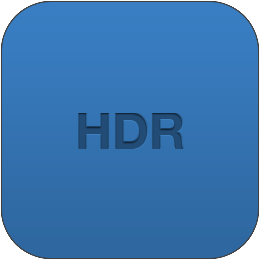
<style>
.page{position:relative;width:260px;height:260px}
.page>*{position:absolute;margin:0}
.t1{font:50px "HelveticaNeue-Bold";color:#224c76}
</style>
<div class="page">
<p class="t1" style="left:78px;top:113px;width:106px;height:36px">HDR</p>
</div>
